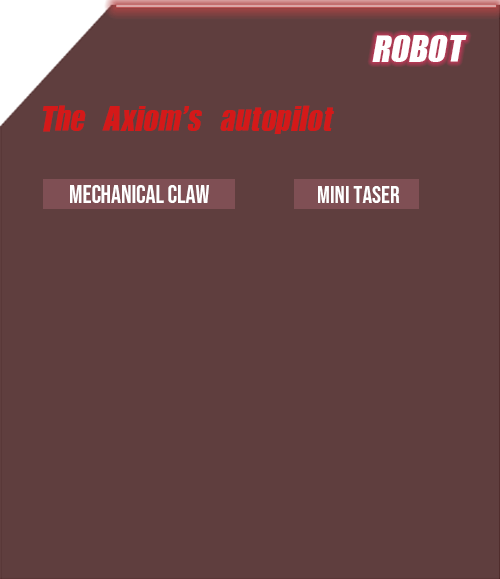
<style>
.page{position:relative;width:500px;height:579px;background:#5f3e3e}
.page>*{position:absolute;margin:0}
.t1{font:40px "JCHEadA";color:#ffffff;font-style:italic}
.t2{font:37.7px "JCHEadA";color:#d41919;font-style:italic}
.t3{font:24.6px "BebasNeue-Regular";color:#ffffff}
.t4{font:24.3px "BebasNeue-Regular";color:#ffffff}
</style>
<div class="page">
<p class="t1" style="left:372px;top:35px;width:95px;height:27px">ROBOT</p>
<p class="t2" style="left:42px;top:105px;width:292px;height:29px">The Axiom's autopilot</p>
<p class="t3" style="left:70px;top:185px;width:139px;height:18px">mechanical claw</p>
<p class="t4" style="left:318px;top:186px;width:82px;height:17px">mini taser</p>
</div>
